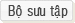
<style>
.page{position:relative;width:75px;height:23px;background:#f9f9f9}
.page>*{position:absolute;margin:0}
.t1{font:14px "VNI-Helve-Condense";color:#474747}
</style>
<div class="page">
<p class="t1" style="left:8px;top:5px;width:60px;height:13px">Boä söu taäp</p>
</div>
